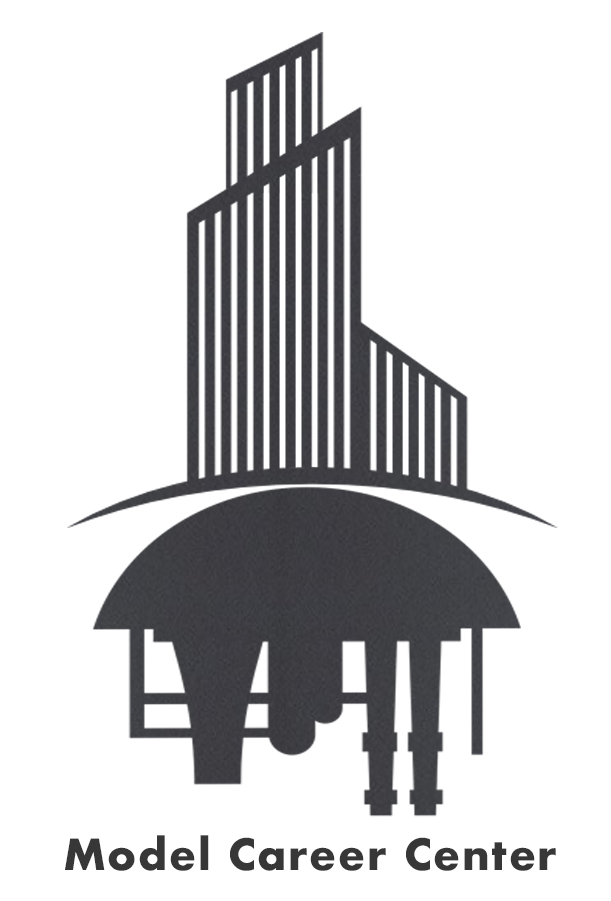
<style>
.page{position:relative;width:611px;height:901px;background:#ffffff}
.page>*{position:absolute;margin:0}
.t1{font:41.7px "Futura-Bold";letter-spacing:0.04em;color:#373737}
</style>
<div class="page">
<p class="t1" style="left:65px;top:835px;width:491px;height:36px">Model Career Center</p>
</div>
